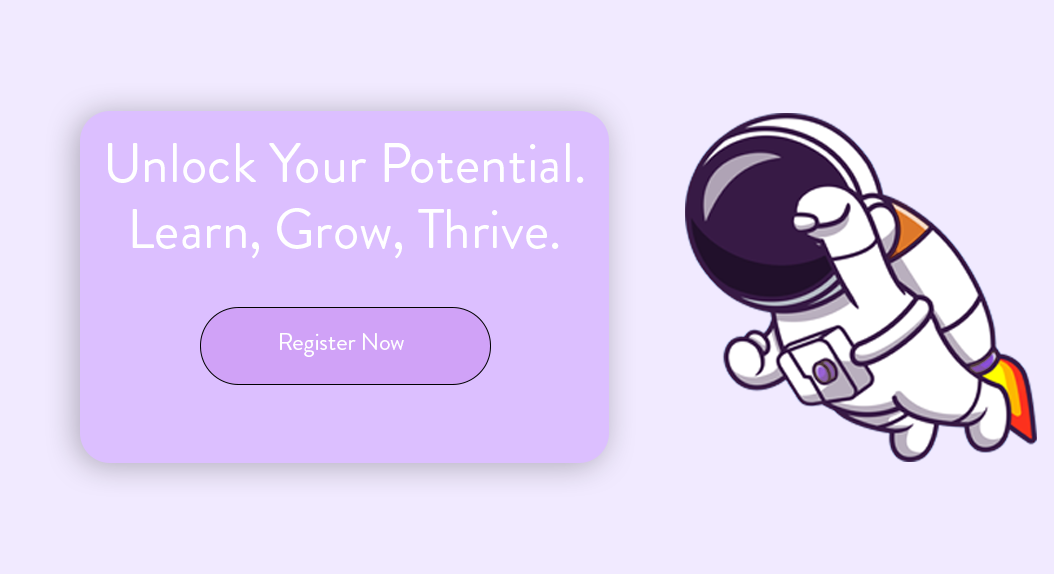
<style>
.page{position:relative;width:1054px;height:574px;background:#f1eaff}
.page>*{position:absolute;margin:0}
.t1{font:55.4px "BrandonGrotesque-Regular";color:#ffffff}
.t2{font:24px "BrandonGrotesque-Regular";color:#ffffff}
</style>
<div class="page">
<p class="t1" style="left:108px;top:143px;width:476px;height:116px;text-align:center">Unlock Your Potential. Learn, Grow, Thrive.</p>
<p class="t2" style="left:280px;top:333px;width:124px;height:24px">Register Now</p>
</div>
